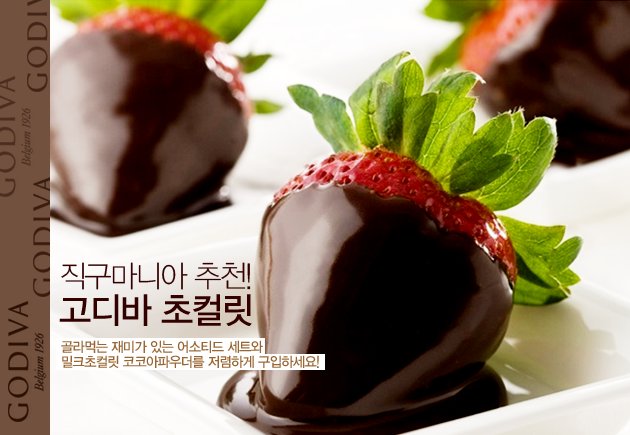
<style>
.page{position:relative;width:630px;height:435px}
.page>*{position:absolute;margin:0}
.t1{font:30px/36px "YDIYGO310";letter-spacing:-0.05em;color:#330000;text-transform:uppercase;scale:0.97 1}
.t2{font:36px/36px "YDIYGO330";letter-spacing:-0.05em;color:#330000;text-transform:uppercase;scale:0.97 1}
.t3{font:14px/15px "YDIYGO330";letter-spacing:-0.05em;color:#996633;text-transform:uppercase;scale:0.95 1}
</style>
<div class="page">
<p class="t1" style="left:59px;top:262px;width:193px;height:64px">직구마니아 추천!<br><span class="t2">고디바 초컬릿</span></p>
<p class="t3" style="left:61px;top:340px;width:258px;height:28px">골라먹는 재미가 있는 어소티드 세트와<br>밀크초컬릿 코코아파우더를 저렴하게 구입하세요!</p>
</div>
